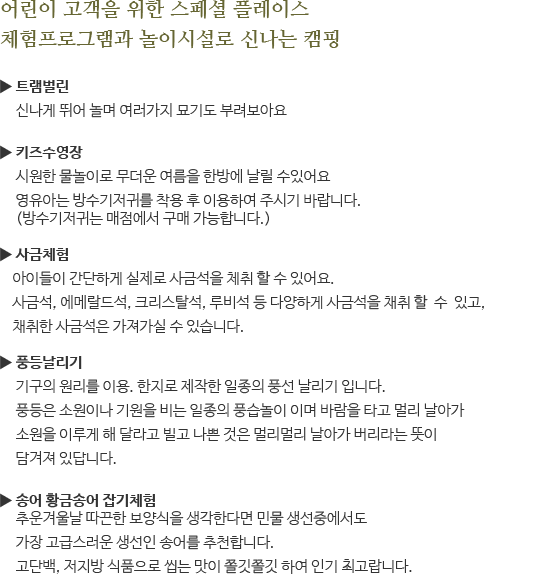
<style>
.page{position:relative;width:536px;height:580px;background:#ffffff}
.page>*{position:absolute;margin:0}
.t1{font:20px/30px "NanumMyeongjoBold";color:#666633}
.t2{font:15px/24px "NanumBarunGothicLight";color:#333333}
.t3{font:15px/24px "NanumBarunGothic";color:#333333}
.t4{font:15px/24px "NanumBarunGothicBold";color:#333333}
.t5{font:15px/18px "NanumBarunGothicLight";color:#333333}
.t6{font:15px/18px "NanumBarunGothic";color:#333333}
.t7{font:15px/18px "NanumBarunGothicBold";color:#333333}
</style>
<div class="page">
<p class="t1" style="left:0px;top:0px;width:339px;height:49px">어린이 고객을 위한 스페셜 플레이스<br>체험프로그램과 놀이시설로 신나는 캠핑</p>
<p class="t2" style="left:0px;top:79px;width:484px;height:495px"><span class="t3">▶ </span><span class="t4">트램벌린<br>     </span><span class="t5">신나게 뛰어 놀며 여러가지 묘기도 부려보아요<br><br></span><span class="t3">▶ </span><span class="t4">키즈수영장<br>     </span>시원한 물놀이로 무더운 여름을 한방에 날릴 수있어요<br><span class="t5">     영유아는 방수기저귀를 착용 후 이용하여 주시기 바랍니다.<br>     (방수기저귀는 매점에서 구매 가능합니다.)<br></span><span class="t6"><br>▶ </span><span class="t7">사금</span><span class="t4">체험<br></span>    아이들이 간단하게 실제로 사금석을 체취 할 수 있어요. <br>    사금석, 에메랄드석, 크리스탈석, 루비석 등 다양하게 사금석을 채취 할  수  있고,<br><span class="t5">    채취한 사금석은 가져가실 수 있습니다.<br></span><span class="t6"><br>▶ </span><span class="t7">풍등</span><span class="t4">날리기<br></span>     기구의 <span class="t5">원</span>리를 이용. 한지로 제작한 일종의 풍선 날리기 입니다.<br>     풍등은 소원이나 기원을 비는 일종의 풍습놀이 이며 바람을 타고 멀리 날아가<br>     소원을 이루게 해 달라고 빌고 나쁜 것은 멀리멀리 날아가 버리라는 뜻이<br>     담겨져 있답니다.    <br><span class="t6"><br>▶ </span><span class="t7">송어 황금송어 잡기체험<br></span>     추운겨울날 따끈한 보양식을 생각한다면 민물 생선중에서도 <br>     가장 고급스러운 생선인 송어를 추천합니다. <br>     고단백, 저지방 식품으로 씹는 맛이 쫄깃쫄깃 하여 인기 최고랍니다.</p>
</div>
